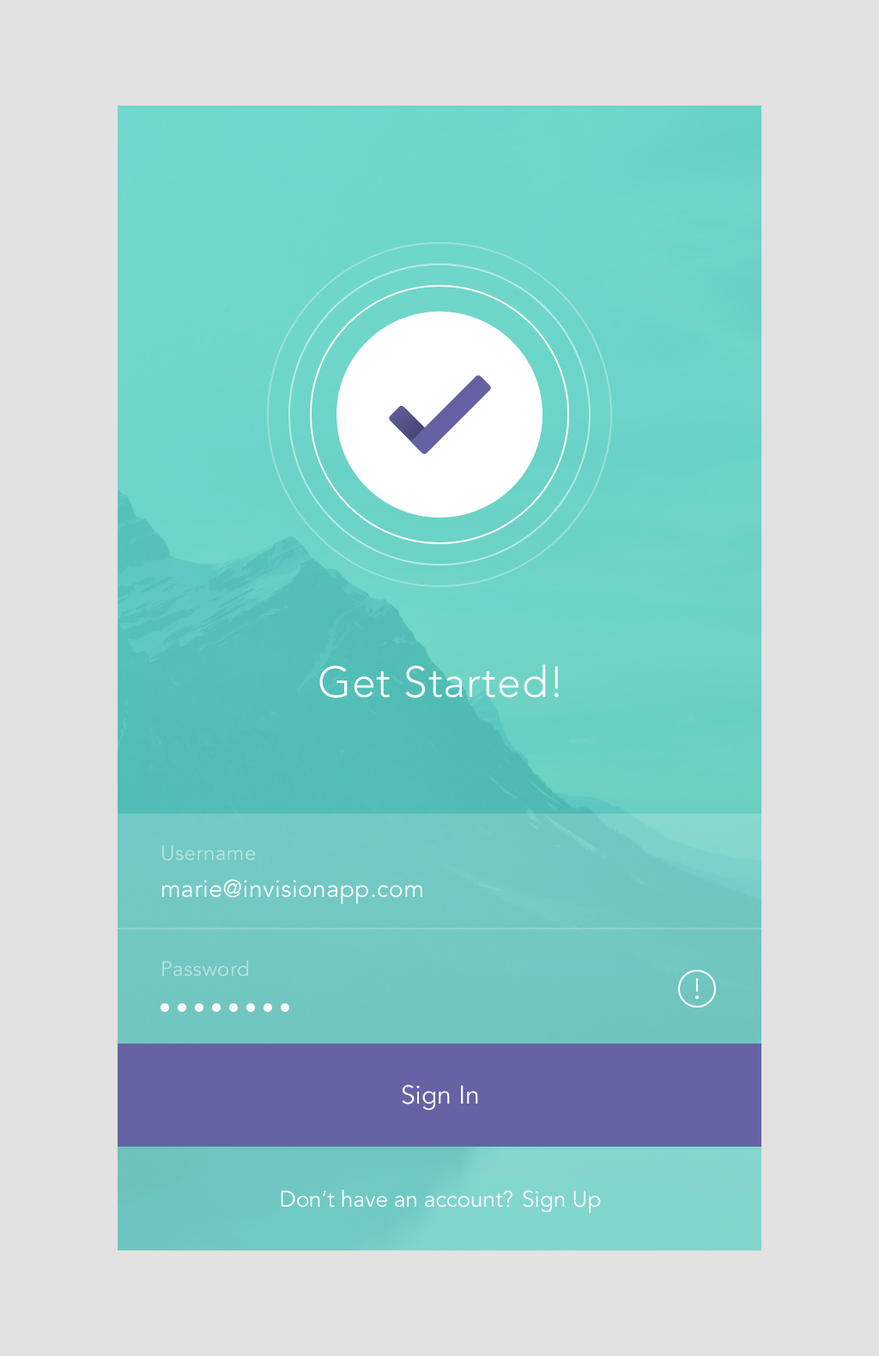
<style>
.page{position:relative;width:879px;height:1356px;background:#e2e2e2}
.page>*{position:absolute;margin:0}
.t1{font:42.9px "Avenir-Light";letter-spacing:0.02em;color:#ffffff}
.t2{font:20.6px "Avenir-Book";letter-spacing:0.02em;color:#b9e4e1}
.t3{font:24px "Avenir-Book";letter-spacing:0.02em;color:#ffffff}
.t4{font:20.6px "Avenir-Book";letter-spacing:0.02em;color:#b8e3e0}
.t5{font:25.8px "Avenir-Book";color:#ffffff}
.t6{font:22.3px "Avenir-Book";color:#ffffff}
</style>
<div class="page">
<p class="t1" style="left:319px;top:664px;width:240px;height:34px">Get Started!</p>
<p class="t2" style="left:162px;top:846px;width:94px;height:15px">Username</p>
<p class="t3" style="left:161px;top:879px;width:261px;height:25px">marie@invisionapp.com</p>
<p class="t4" style="left:162px;top:960px;width:86px;height:17px">Password</p>
<p class="t5" style="left:402px;top:1085px;width:76px;height:26px">Sign In</p>
<p class="t6" style="left:281px;top:1190px;width:232px;height:18px">Don’t have an account?</p>
<p class="t6" style="left:523px;top:1191px;width:78px;height:23px">Sign Up</p>
</div>
